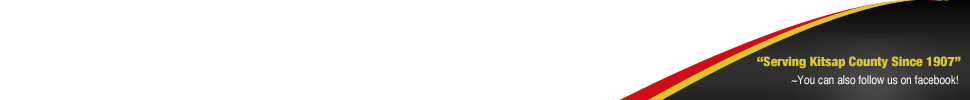
<style>
.page{position:relative;width:970px;height:100px;background:#ffffff}
.page>*{position:absolute;margin:0}
.t1{font:12.9px "HelveticaNeue-CondensedBlack";color:#ddc62e;scale:1.06 1}
.t2{font:5px "HelveticaNeue-CondensedBlack";color:#ddc62e;scale:1.06 1}
.t3{font:11.8px "Helvetica";color:#ffffff;scale:0.86 1}
</style>
<div class="page">
<p class="t1" style="left:757px;top:56px;width:204px;height:13px"><span class="t2">     <br></span>“Serving Kitsap County Since 1907”</p>
<p class="t3" style="left:791px;top:75px;width:167px;height:10px">~You can also follow us on facebook!</p>
</div>
